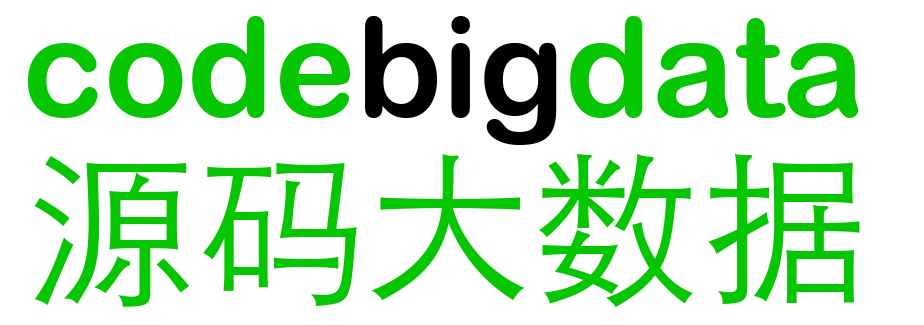
<style>
.page{position:relative;width:924px;height:325px;background:#ffffff}
.page>*{position:absolute;margin:0}
.t1{font:137.9px "ArialRoundedMTBold";color:#05c601}
.t2{font:137.9px "ArialRoundedMTBold";color:#000000}
.t3{font:167.9px "STHeitiSC-Light";color:#05c601}
</style>
<div class="page">
<p class="t1" style="left:27px;top:16px;width:832px;height:129px">code<span class="t2">big</span>data</p>
<p class="t3" style="left:34px;top:154px;width:826px;height:153px">源码大数据</p>
</div>
